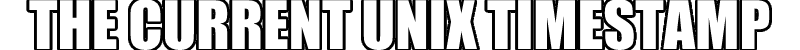
<style>
.page{position:relative;width:800px;height:50px;background:#ffffff}
.page>*{position:absolute;margin:0}
.t1{font:61.8px "Impact";color:#ffffff}
</style>
<div class="page">
<p class="t1" style="left:29px;top:0px;width:741px;height:51px">THE CURRENT UNIX TIMESTAMP</p>
</div>
